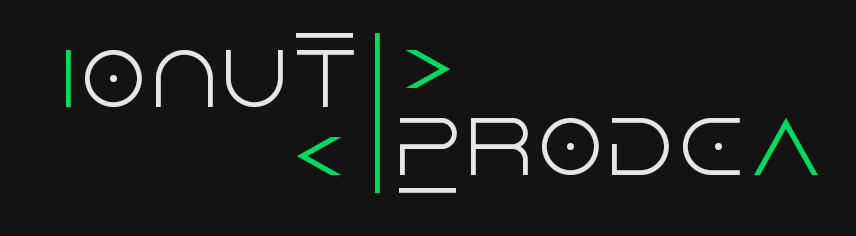
<style>
.page{position:relative;width:856px;height:236px;background:#131313}
.page>*{position:absolute;margin:0}
.t1{font:71.3px "Dune_Rise";color:#e6e6e6}
.t2{font:199.4px "Dune_Rise";color:#04d960;scale:0.36 1}
.t3{font:70.9px "Dune_Rise";color:#e6e6e6}
.t4{font:70.9px "Dune_Rise";color:#04d960}
.t5{font:70.9px "Dune_Rise";color:#ffffff}
</style>
<div class="page">
<p class="t1" style="left:296px;top:33px;width:57px;height:5px;rotate:90deg">I</p>
<p class="t2" style="left:375px;top:33px;width:5px;height:160px">I</p>
<p class="t3" style="left:66px;top:50px;width:288px;height:57px"><span class="t4">I</span>onut</p>
<p class="t4" style="left:406px;top:50px;width:44px;height:38px">&gt;</p>
<p class="t3" style="left:400px;top:118px;width:418px;height:57px"><span class="t5"><br></span>ProdE<span class="t4">a</span></p>
<p class="t4" style="left:297px;top:137px;width:44px;height:38px">&lt;</p>
<p class="t1" style="left:399px;top:188px;width:57px;height:5px;rotate:90deg">I</p>
</div>
